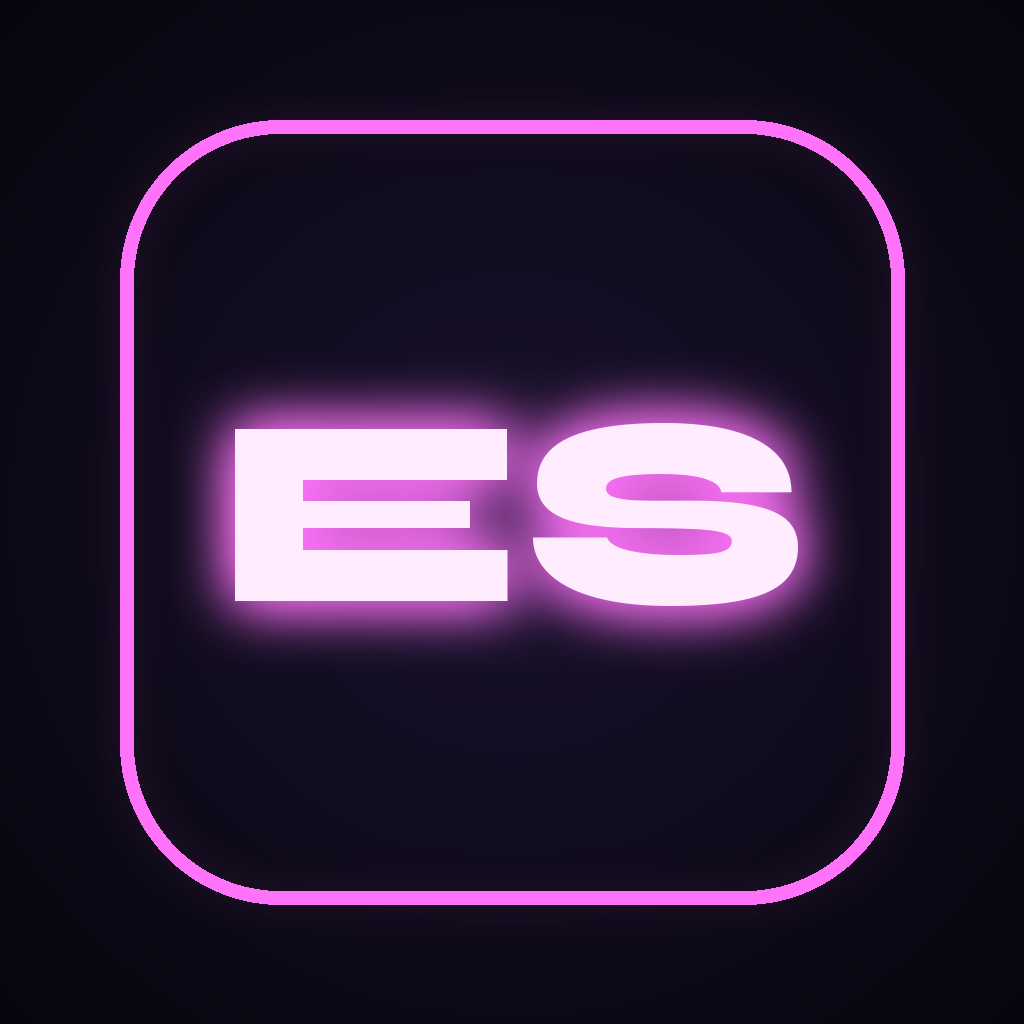
<style>
.page{position:relative;width:1024px;height:1024px}
.page>*{position:absolute;margin:0}
.t1{font:270px "Syne-ExtraBold";color:#ffecff}
</style>
<div class="page">
<p class="t1" style="left:235px;top:423px;width:563px;height:183px">ES</p>
</div>
